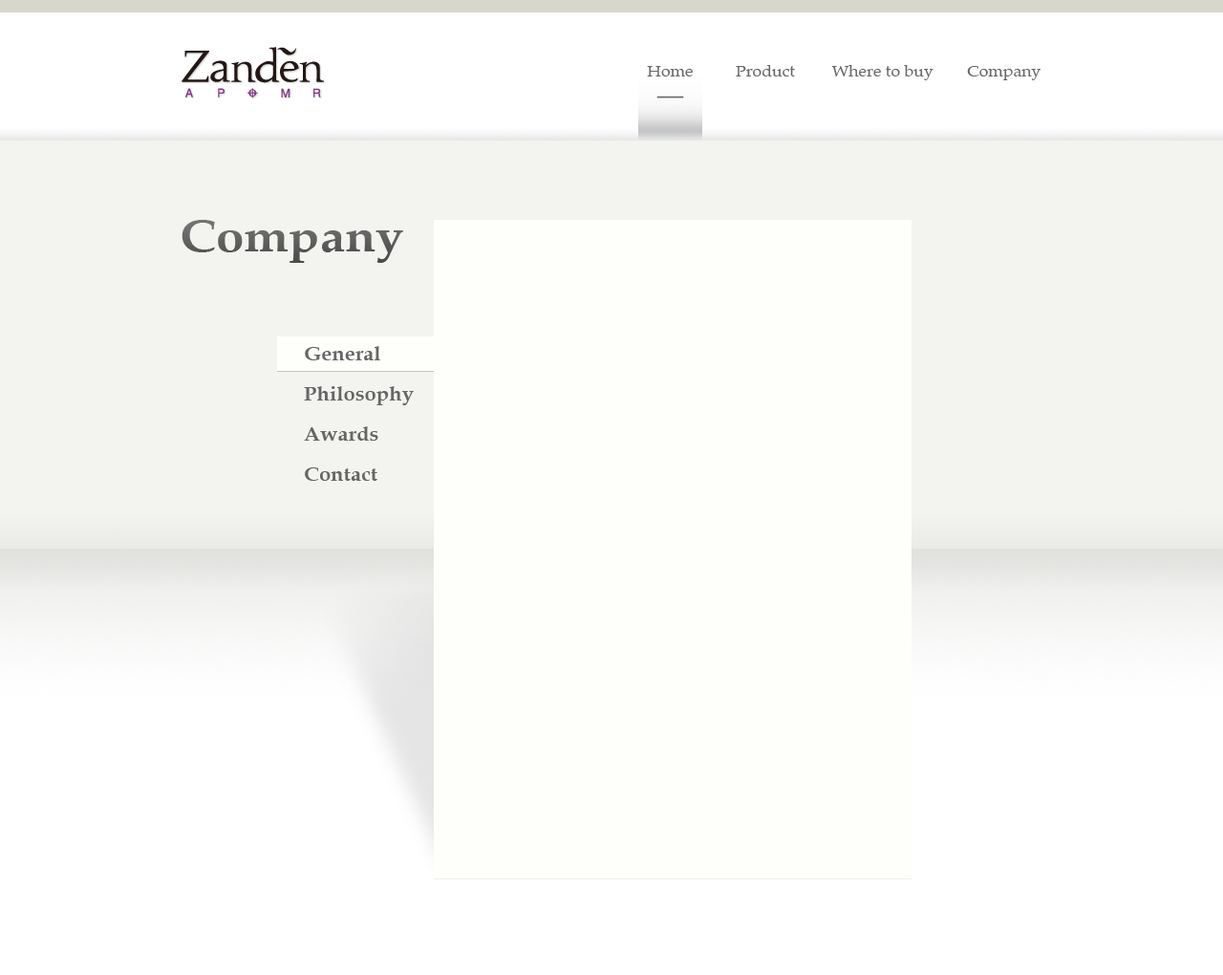
<style>
.page{position:relative;width:1223px;height:975px;background:#ffffff}
.page>*{position:absolute;margin:0}
.t1{font:15.3px "Palatino-Roman";color:#666666;scale:1.1 1}
.t2{font:45.9px "Palatino-Bold";color:#666666;scale:1.1 1}
.t3{font:19.1px/40.1px "Palatino-Bold";color:#666666;scale:1.1 1}
</style>
<div class="page">
<p class="t1" style="left:647px;top:66px;width:46px;height:10px">Home</p>
<p class="t1" style="left:736px;top:65px;width:59px;height:11px">Product</p>
<p class="t1" style="left:831px;top:65px;width:103px;height:15px">Where to buy</p>
<p class="t1" style="left:967px;top:66px;width:74px;height:14px">Company</p>
<p class="t2" style="left:182px;top:220px;width:221px;height:43px">Company</p>
<p class="t3" style="left:304px;top:346px;width:110px;height:135px">General<br>Philosophy<br>Awards<br>Contact</p>
</div>
